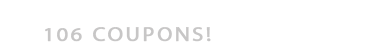
<style>
.page{position:relative;width:384px;height:56px;background:#ffffff}
.page>*{position:absolute;margin:0}
.t1{font:19.8px "MyriadPro-Regular";letter-spacing:0.1em;color:#c7c7c7;text-transform:uppercase;font-weight:bold;scale:1.11 1}
</style>
<div class="page">
<p class="t1" style="left:45px;top:27px;width:166px;height:15px">106 coupons!</p>
</div>
